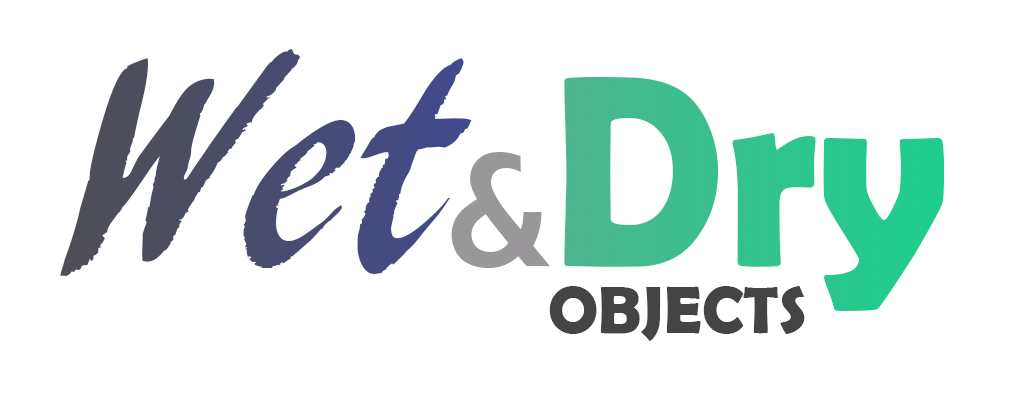
<style>
.page{position:relative;width:1024px;height:410px;background:#ffffff}
.page>*{position:absolute;margin:0}
.t1{font:305.6px "ARBLANCA";scale:0.88 1}
.t2{font:168px "ErasITC-Demi";scale:0.88 1}
.t3{font:275px "BerlinSansFBDemi-Bold";scale:0.88 1}
.t4{font:67.2px "BerlinSansFBDemi-Bold";color:#444444}
</style>
<div class="page">
<p class="t1" style="left:60px;top:49px;width:885px;height:262px">Wet<span class="t2">&amp;</span><span class="t3">Dry</span></p>
<p class="t4" style="left:549px;top:286px;width:256px;height:55px">OBJECTS</p>
</div>
